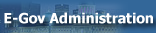
<style>
.page{position:relative;width:156px;height:33px}
.page>*{position:absolute;margin:0}
.t1{font:13.1px "Tahoma-Bold";color:#ffffff}
</style>
<div class="page">
<p class="t1" style="left:4px;top:12px;width:149px;height:12px">E-Gov Administration</p>
</div>
